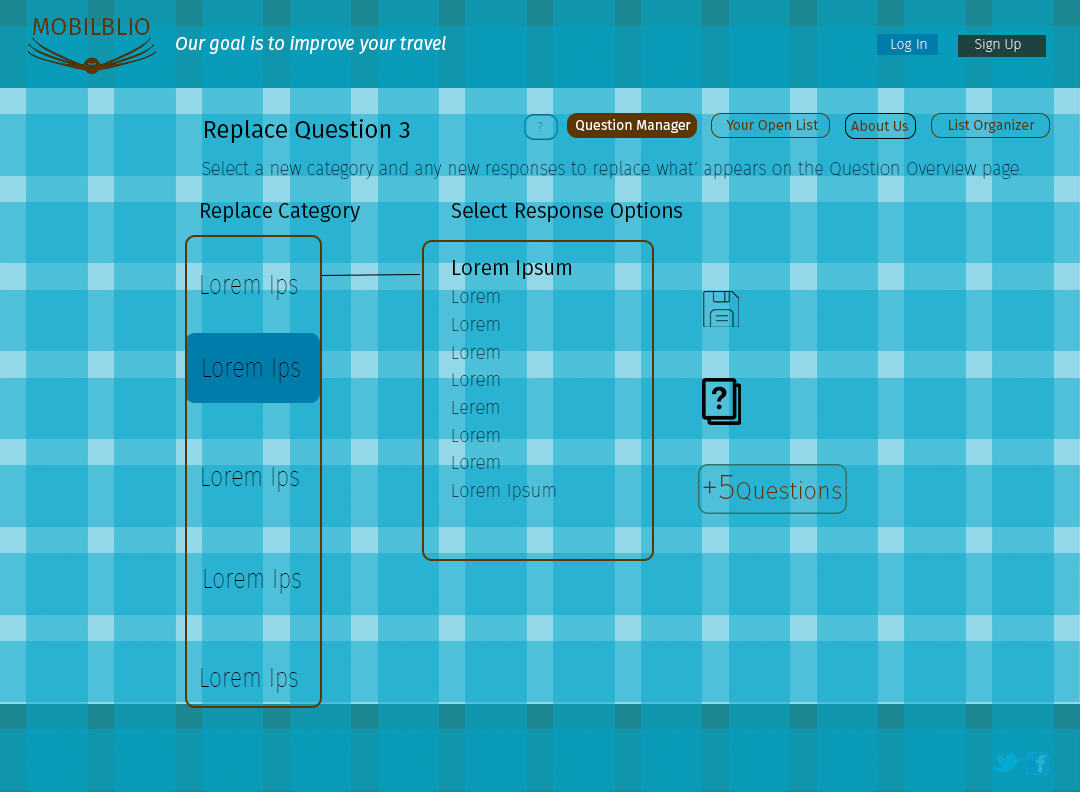
<style>
.page{position:relative;width:1080px;height:792px;background:#29b2d1}
.page>*{position:absolute;margin:0}
.t1{font:24px "FiraSans-Book";color:#5c3600}
.t2{font:18px "FiraSans-BookItalic";color:#ffffff}
.t3{font:14px "FiraSans-Hair";color:#ffffff}
.t4{font:14px "FiraSans-Hair"}
.t5{font:24px "FiraSans-Book";color:#000000}
.t6{font:14px "FiraSans-Book";color:#fefefe}
.t7{font:14px "FiraSans-Book";color:#5c3600}
.t8{font:18px "FiraSans-Hair";color:#000000}
.t9{font:20.8px "FiraSans-Book";color:#000000}
.t10{font:18.5px/27.7px "FiraSans-Hair";color:#000000}
.t11{font:20.8px/27.7px "FiraSans-Book";color:#000000}
.t12{font:27.7px "FiraSans-Hair";color:#000000;scale:0.83 1}
.t13{font:41.6px "MyriadPro-Regular";color:#000000;scale:0.83 1}
.t14{font:24px "FiraSans-UltraLight";color:#5c3600}
.t15{font:36px "FiraSans-UltraLight";color:#5c3600}
</style>
<div class="page">
<p class="t1" style="left:33px;top:18px;width:117px;height:17px">MOBILBLIO</p>
<p class="t2" style="left:176px;top:36px;width:270px;height:18px">Our goal is to improve your travel</p>
<p class="t3" style="left:891px;top:39px;width:36px;height:13px">Log In</p>
<p class="t4" style="left:975px;top:39px;width:46px;height:13px">Sign Up</p>
<p class="t5" style="left:205px;top:119px;width:205px;height:24px">Replace Question 3</p>
<p class="t4" style="left:537px;top:122px;width:6px;height:10px">?</p>
<p class="t6" style="left:576px;top:119px;width:115px;height:14px">Question Manager</p>
<p class="t7" style="left:726px;top:119px;width:93px;height:14px">Your Open List</p>
<p class="t7" style="left:851px;top:120px;width:57px;height:11px">About Us</p>
<p class="t7" style="left:949px;top:119px;width:86px;height:14px">List Organizer</p>
<p class="t8" style="left:202px;top:161px;width:820px;height:18px">Select a new category and any new responses to replace what’ appears on the Question Overview page.</p>
<p class="t9" style="left:201px;top:202px;width:159px;height:20px">Replace Category</p>
<p class="t9" style="left:451px;top:202px;width:231px;height:20px">Select Response Options</p>
<p class="t10" style="left:452px;top:260px;width:119px;height:241px"><span class="t11">Lorem Ipsum<br></span>Lorem<br>Lorem<br>Lorem<br>Lorem<br>Lerem<br>Lorem<br>Lorem<br>Lorem Ipsum</p>
<p class="t12" style="left:201px;top:275px;width:97px;height:25px"><span class="t13"><br></span>Lorem Ips</p>
<p class="t12" style="left:203px;top:358px;width:97px;height:25px"><span class="t13"><br></span>Lorem Ips</p>
<p class="t12" style="left:202px;top:467px;width:97px;height:25px"><span class="t13"><br></span>Lorem Ips</p>
<p class="t14" style="left:703px;top:475px;width:138px;height:26px"><span class="t15">+5</span>Questions</p>
<p class="t12" style="left:204px;top:569px;width:97px;height:25px"><span class="t13"><br></span>Lorem Ips</p>
<p class="t12" style="left:201px;top:668px;width:97px;height:25px"><span class="t13"><br></span>Lorem Ips</p>
</div>
